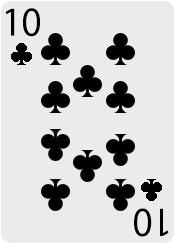
<style>
.page{position:relative;width:175px;height:244px;background:#ebebeb}
.page>*{position:absolute;margin:0}
.t1{font:36px "KozGoPr6N-Regular";color:#000000}
</style>
<div class="page">
<p class="t1" style="left:5px;top:8px;width:35px;height:29px">10</p>
<p class="t1" style="left:134px;top:208px;width:35px;height:29px;rotate:-180deg">10</p>
</div>
